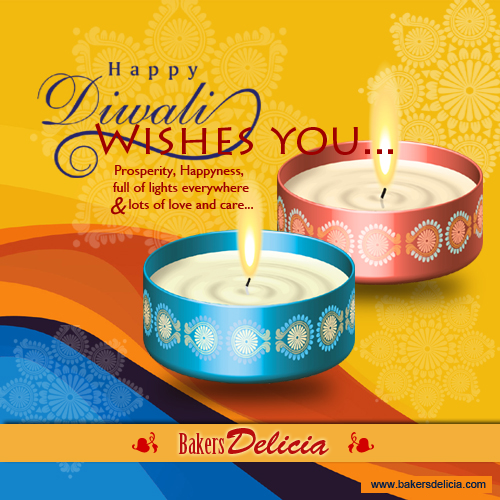
<style>
.page{position:relative;width:500px;height:500px}
.page>*{position:absolute;margin:0}
.t1{font:43.9px "LithosPro-Regular";color:#9e0101}
.t2{font:14px "GillSansMT";color:#9e0000}
.t3{font:24.5px "GillSansMT-Italic";color:#9e0000;font-style:italic}
.t4{font:27.9px "BirchStd";color:#b90d0d}
.t5{font:36.2px "BrushScriptStd";color:#b90d0d}
.t6{font:11px "ArialMT";color:#011f4b}
</style>
<div class="page">
<p class="t1" style="left:95px;top:123px;width:298px;height:33px">Wishes you...</p>
<p class="t2" style="left:113px;top:165px;width:136px;height:30px;text-align:center">Prosperity, Happyness, <br>full of lights everywhere</p>
<p class="t3" style="left:110px;top:197px;width:17px;height:18px">&amp;</p>
<p class="t2" style="left:129px;top:199px;width:124px;height:10px">lots of love and care...</p>
<p class="t4" style="left:178px;top:433px;width:47px;height:21px">Bakers</p>
<p class="t5" style="left:226px;top:428px;width:103px;height:27px">Delicia</p>
<p class="t6" style="left:371px;top:480px;width:115px;height:8px">www.bakersdelicia.com</p>
</div>
